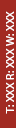
<style>
.page{position:relative;width:16px;height:128px;background:#a22a22}
.page>*{position:absolute;margin:0}
.t1{font:12px "MyriadPro-Regular";color:#ffffff}
</style>
<div class="page">
<p class="t1" style="left:6px;top:11px;width:8px;height:103px;rotate:-90deg">T: XXX R: XXX W: XXX</p>
</div>
